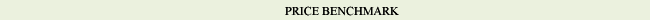
<style>
.page{position:relative;width:650px;height:20px;background:#ebf1de}
.page>*{position:absolute;margin:0}
.t1{font:12px "TimesNewRomanPSMT";color:#040404}
</style>
<div class="page">
<p class="t1" style="left:285px;top:6px;width:114px;height:10px">PRICE BENCHMARK</p>
</div>
